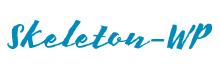
<style>
.page{position:relative;width:220px;height:70px;background:#ffffff}
.page>*{position:absolute;margin:0}
.t1{font:58.3px "Harlott";color:#008cba}
</style>
<div class="page">
<p class="t1" style="left:7px;top:20px;width:205px;height:30px">Skeleton-WP</p>
</div>
